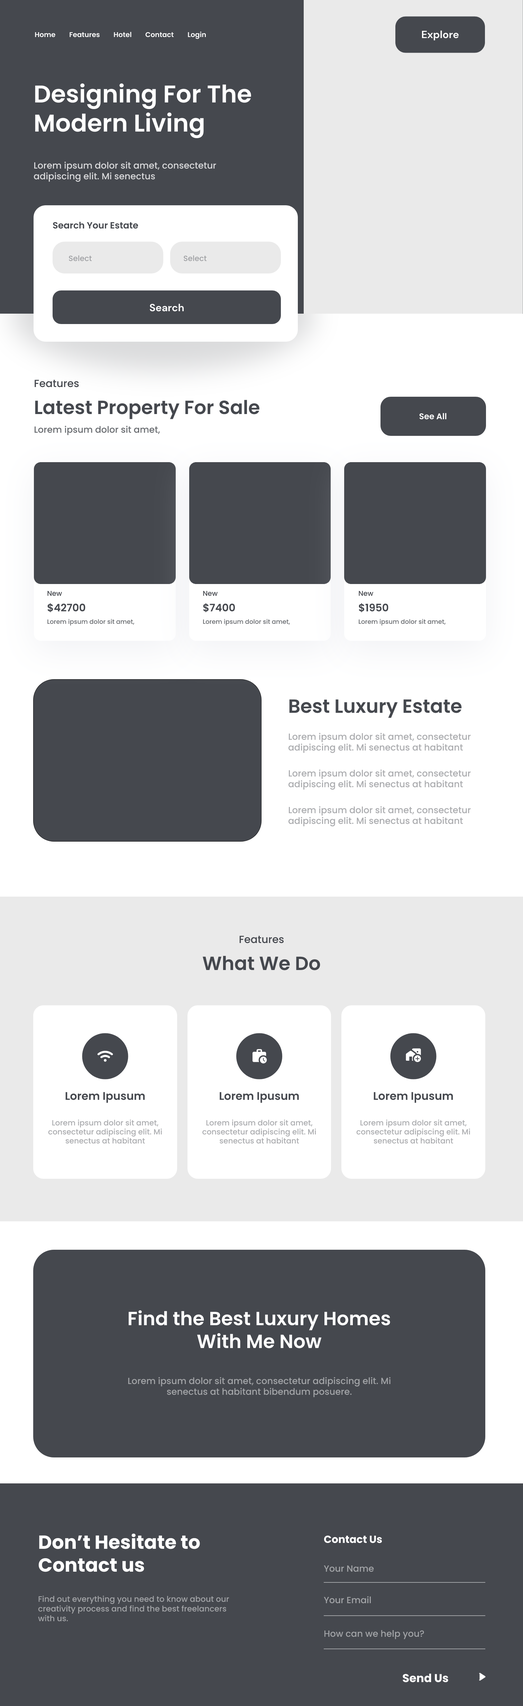
<style>
.page{position:relative;width:523px;height:1706px;background:#45484e}
.page>*{position:absolute;margin:0}
.t1{font:6.9px "Poppins-SemiBold";color:#ffffff}
.t2{font:10.4px "DMSans-Bold";color:#ffffff}
.t3{font:24.2px "Poppins-SemiBold";color:#ffffff}
.t4{font:9px "Poppins-Medium";color:#dadadc}
.t5{font:9px "Poppins-SemiBold";color:#45484e}
.t6{font:7.6px "Poppins-Medium";color:#a0a1a4}
.t7{font:10.4px "Poppins-Medium";color:#45484e}
.t8{font:19px "Poppins-SemiBold";color:#45484e}
.t9{font:8.3px "Poppins-SemiBold";color:#ffffff}
.t10{font:9px "Poppins-Medium";color:#6a6d71}
.t11{font:6.9px "Poppins-Medium";color:#45484e}
.t12{font:10.4px "Poppins-SemiBold";color:#45484e}
.t13{font:6.2px "Poppins-Medium";color:#6a6d71}
.t14{font:9px "Poppins-Medium";color:#abacaf}
.t15{font:11.1px "Poppins-SemiBold";color:#45484e}
.t16{font:7.6px "Poppins-Medium";color:#abacaf}
.t17{font:19px "Poppins-SemiBold";color:#ffffff}
.t18{font:9px "Poppins-Medium";color:#a2a4a7}
.t19{font:19px "Poppins-Bold";color:#ffffff}
.t20{font:10.4px "Poppins-Bold";color:#ffffff}
.t21{font:8px "Poppins-Medium";color:#a2a4a7}
.t22{font:11.4px "Poppins-Bold";color:#ffffff}
</style>
<div class="page">
<p class="t1" style="left:35px;top:32px;width:20px;height:5px">Home</p>
<p class="t1" style="left:70px;top:32px;width:30px;height:5px">Features</p>
<p class="t1" style="left:114px;top:32px;width:18px;height:5px">Hotel</p>
<p class="t1" style="left:145px;top:32px;width:29px;height:5px">Contact</p>
<p class="t1" style="left:188px;top:32px;width:18px;height:7px">Login</p>
<p class="t2" style="left:422px;top:30px;width:37px;height:10px">Explore</p>
<p class="t3" style="left:35px;top:83px;width:216px;height:55px">Designing For The <br>Modern Living</p>
<p class="t4" style="left:34px;top:161px;width:182px;height:21px">Lorem ipsum dolor sit amet, consectetur adipiscing elit. Mi senectus</p>
<p class="t5" style="left:53px;top:222px;width:85px;height:7px">Search Your Estate</p>
<p class="t6" style="left:69px;top:255px;width:23px;height:6px">Select</p>
<p class="t6" style="left:184px;top:255px;width:23px;height:6px">Select</p>
<p class="t2" style="left:150px;top:304px;width:34px;height:8px">Search</p>
<p class="t7" style="left:35px;top:380px;width:44px;height:7px">Features</p>
<p class="t8" style="left:35px;top:400px;width:225px;height:19px">Latest Property For Sale</p>
<p class="t9" style="left:420px;top:413px;width:27px;height:7px">See All</p>
<p class="t10" style="left:34px;top:425px;width:126px;height:10px">Lorem ipsum dolor sit amet,</p>
<p class="t11" style="left:47px;top:591px;width:15px;height:5px">New</p>
<p class="t11" style="left:203px;top:591px;width:15px;height:5px">New</p>
<p class="t11" style="left:359px;top:591px;width:15px;height:5px">New</p>
<p class="t12" style="left:47px;top:603px;width:39px;height:9px">$42700</p>
<p class="t12" style="left:203px;top:603px;width:32px;height:9px">$7400</p>
<p class="t12" style="left:359px;top:603px;width:30px;height:9px">$1950</p>
<p class="t13" style="left:47px;top:619px;width:88px;height:7px">Lorem ipsum dolor sit amet,</p>
<p class="t13" style="left:203px;top:619px;width:87px;height:7px">Lorem ipsum dolor sit amet,</p>
<p class="t13" style="left:359px;top:619px;width:87px;height:7px">Lorem ipsum dolor sit amet,</p>
<p class="t8" style="left:289px;top:699px;width:173px;height:19px">Best Luxury Estate</p>
<p class="t14" style="left:288px;top:732px;width:183px;height:21px">Lorem ipsum dolor sit amet, consectetur adipiscing elit. Mi senectus at habitant</p>
<p class="t14" style="left:288px;top:769px;width:183px;height:21px">Lorem ipsum dolor sit amet, consectetur adipiscing elit. Mi senectus at habitant</p>
<p class="t14" style="left:288px;top:806px;width:183px;height:21px">Lorem ipsum dolor sit amet, consectetur adipiscing elit. Mi senectus at habitant</p>
<p class="t7" style="left:240px;top:936px;width:44px;height:7px">Features</p>
<p class="t8" style="left:203px;top:956px;width:118px;height:14px">What We Do</p>
<p class="t15" style="left:65px;top:1092px;width:80px;height:11px">Lorem Ipusum</p>
<p class="t15" style="left:220px;top:1092px;width:79px;height:11px">Lorem Ipusum</p>
<p class="t15" style="left:374px;top:1092px;width:79px;height:11px">Lorem Ipusum</p>
<p class="t16" style="left:48px;top:1119px;width:114px;height:25px;text-align:center">Lorem ipsum dolor sit amet, consectetur adipiscing elit. Mi senectus at habitant</p>
<p class="t16" style="left:202px;top:1119px;width:114px;height:25px;text-align:center">Lorem ipsum dolor sit amet, consectetur adipiscing elit. Mi senectus at habitant</p>
<p class="t16" style="left:357px;top:1119px;width:113px;height:25px;text-align:center">Lorem ipsum dolor sit amet, consectetur adipiscing elit. Mi senectus at habitant</p>
<p class="t17" style="left:129px;top:1310px;width:261px;height:38px;text-align:center">Find the Best Luxury Homes <br>With Me Now</p>
<p class="t18" style="left:128px;top:1377px;width:263px;height:20px;text-align:center">Lorem ipsum dolor sit amet, consectetur adipiscing elit. Mi senectus at habitant bibendum posuere.</p>
<p class="t19" style="left:38px;top:1533px;width:162px;height:39px">Don’t Hesitate to<br>Contact us</p>
<p class="t20" style="left:324px;top:1535px;width:58px;height:8px">Contact Us</p>
<p class="t18" style="left:324px;top:1565px;width:50px;height:7px">Your Name</p>
<p class="t21" style="left:38px;top:1595px;width:191px;height:26px">Find out everything you need to know about our creativity process and find the best freelancers with us.</p>
<p class="t18" style="left:324px;top:1596px;width:47px;height:7px">Your Email</p>
<p class="t18" style="left:324px;top:1630px;width:100px;height:9px">How can we help you?</p>
<p class="t22" style="left:403px;top:1673px;width:46px;height:9px">Send Us</p>
</div>
